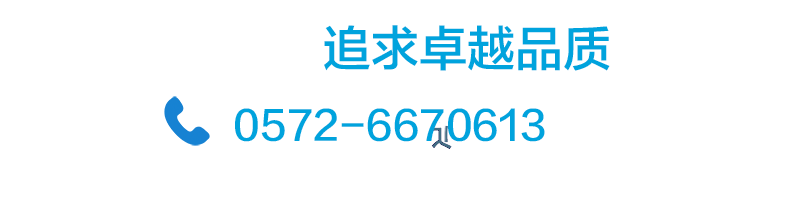
<style>
.page{position:relative;width:794px;height:198px;background:#ffffff}
.page>*{position:absolute;margin:0}
.t1{font:48px "FZLTZHK--GBK1-0";color:#00a3dd}
.t2{font:40px "FZLTZHK--GBK1-0";color:#00a3dd}
</style>
<div class="page">
<p class="t1" style="left:324px;top:25px;width:286px;height:46px">追求卓越品质</p>
<p class="t2" style="left:235px;top:108px;width:310px;height:34px">0572-6670613</p>
</div>
